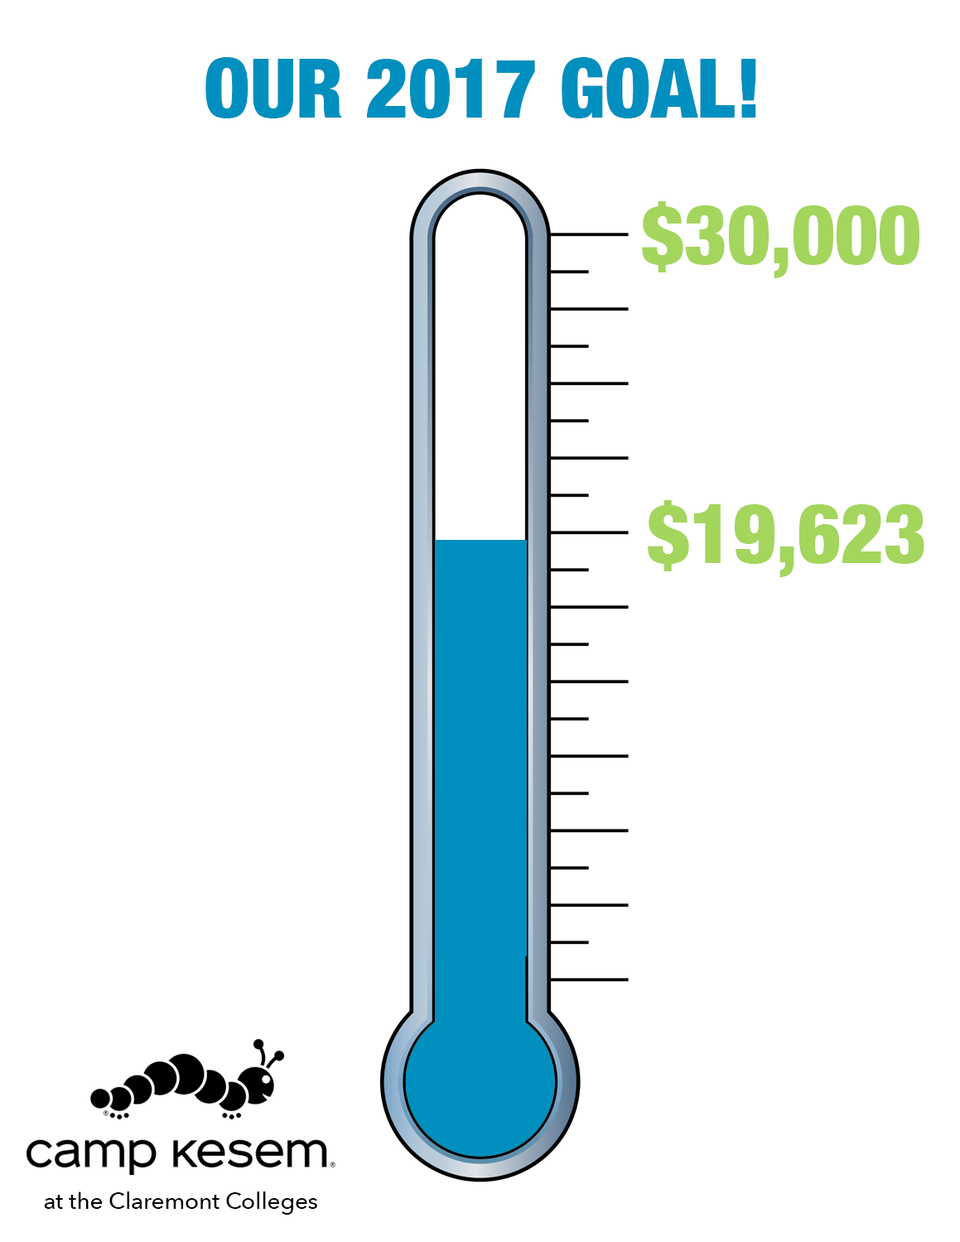
<style>
.page{position:relative;width:960px;height:1242px;background:#ffffff}
.page>*{position:absolute;margin:0}
.t1{font:82.8px "HelveticaNeue-CondensedBlack";color:#008fbe}
.t2{font:82.8px "HelveticaNeue-CondensedBlack";color:#a4d55d}
.t3{font:22.9px "AvenirNext-Medium";color:#000000}
</style>
<div class="page">
<p class="t1" style="left:205px;top:57px;width:551px;height:61px">OUR 2017 GOAL!</p>
<p class="t2" style="left:642px;top:201px;width:278px;height:77px">$30,000</p>
<p class="t2" style="left:648px;top:500px;width:276px;height:77px">$19,623</p>
<p class="t3" style="left:44px;top:1192px;width:273px;height:23px">at the Claremont Colleges</p>
</div>
